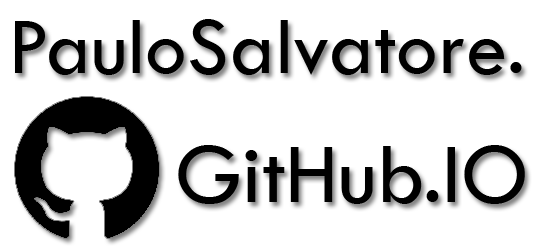
<style>
.page{position:relative;width:538px;height:250px;background:#ffffff}
.page>*{position:absolute;margin:0}
.t1{font:83.3px/129.2px "TwCenMT-Regular";color:#000000}
.t2{font:87.5px/129.2px "TwCenMT-Regular";color:#000000}
</style>
<div class="page">
<p class="t1" style="left:15px;top:19px;width:510px;height:185px">PauloSalvatore.<br>     <span class="t2">GitHub.IO</span></p>
</div>
